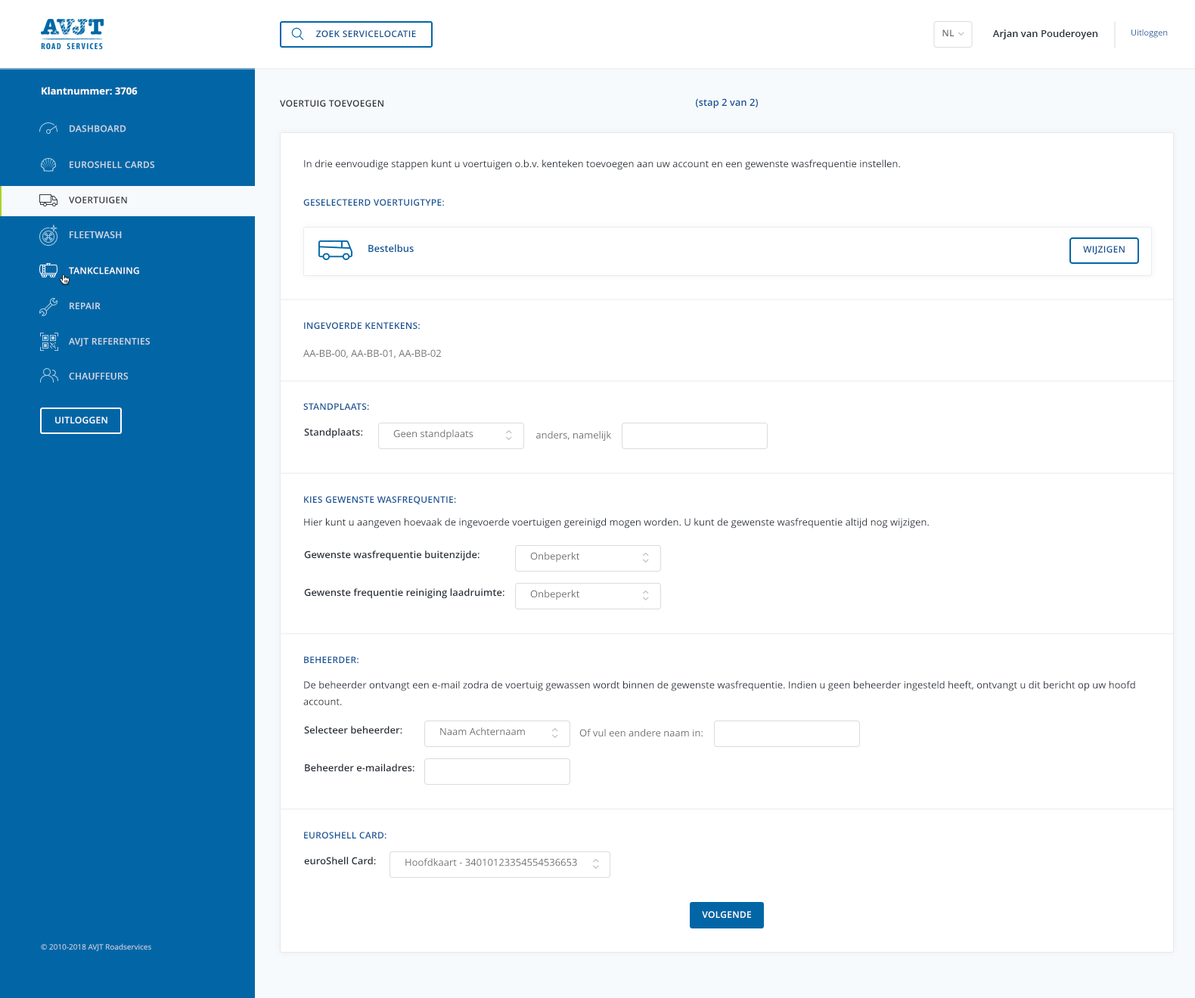
<style>
.page{position:relative;width:1195px;height:998px;background:#ffffff}
.page>*{position:absolute;margin:0}
.t1{font:9.1px "OpenSans-Semibold";letter-spacing:0.023em;color:#6d6d6d;text-transform:uppercase}
.t2{font:9.8px "OpenSans-Semibold";color:#262d37}
.t3{font:8.3px "OpenSans"}
.t4{font:9.1px "OpenSans-Semibold";letter-spacing:0.023em;color:#0b5195;text-transform:uppercase}
.t5{font:9.8px "OpenSans-Bold";color:#ffffff}
.t6{font:9.1px "OpenSans-Semibold";letter-spacing:0.023em;color:#262d37;text-transform:uppercase}
.t7{font:9.8px "OpenSans-Semibold";color:#0b5195}
.t8{font:9.1px "OpenSans-Semibold";letter-spacing:0.023em;color:#cbd8e6;text-transform:uppercase}
.t9{font:9.8px "OpenSans";color:#262d37}
.t10{font:9.1px "OpenSans-Semibold";letter-spacing:0.023em;color:#cbd9e7;text-transform:uppercase}
.t11{font:9.8px "OpenSans-Semibold";color:#005396}
.t12{font:9.1px "OpenSans-Semibold";letter-spacing:0.023em;color:#ffffff;text-transform:uppercase}
.t13{font:9.8px "OpenSans";color:#6d6d6d}
.t14{font:9.8px "OpenSans";color:#282f38}
.t15{font:9.8px/16.6px "OpenSans";color:#262d37}
.t16{font:7.6px "OpenSans"}
</style>
<div class="page">
<p class="t1" style="left:942px;top:29px;width:12px;height:7px">NL</p>
<p class="t2" style="left:992px;top:29px;width:106px;height:10px">Arjan van Pouderoyen</p>
<p class="t3" style="left:1130px;top:29px;width:37px;height:9px">Uitloggen</p>
<p class="t4" style="left:316px;top:30px;width:100px;height:8px">zoek servicelocatie</p>
<p class="t5" style="left:42px;top:87px;width:96px;height:8px">Klantnummer: 3706</p>
<p class="t6" style="left:280px;top:100px;width:103px;height:7px">Voertuig toevoegen</p>
<p class="t7" style="left:696px;top:98px;width:62px;height:11px">(stap 2 van 2)</p>
<p class="t8" style="left:70px;top:125px;width:56px;height:7px">dashboard</p>
<p class="t8" style="left:70px;top:161px;width:85px;height:8px">EuroShell Cards</p>
<p class="t9" style="left:304px;top:160px;width:596px;height:10px">In drie eenvoudige stappen kunt u voertuigen o.b.v. kenteken toevoegen aan uw account en een gewenste wasfrequentie instellen.</p>
<p class="t6" style="left:69px;top:197px;width:58px;height:6px">voertuigen</p>
<p class="t4" style="left:303px;top:199px;width:141px;height:7px">Geselecteerd voertuigtype:</p>
<p class="t10" style="left:70px;top:231px;width:52px;height:7px">fleetwash</p>
<p class="t11" style="left:368px;top:244px;width:46px;height:9px">Bestelbus</p>
<p class="t4" style="left:1083px;top:246px;width:41px;height:9px">Wijzigen</p>
<p class="t12" style="left:69px;top:267px;width:70px;height:7px">tankcleaning</p>
<p class="t8" style="left:70px;top:302px;width:31px;height:7px">repair</p>
<p class="t4" style="left:304px;top:322px;width:116px;height:8px">ingevoerde kentekens:</p>
<p class="t10" style="left:69px;top:337px;width:81px;height:10px">avjt referenties</p>
<p class="t13" style="left:303px;top:349px;width:139px;height:9px">AA-BB-00, AA-BB-01, AA-BB-02</p>
<p class="t10" style="left:69px;top:373px;width:60px;height:7px">chauffeurs</p>
<p class="t4" style="left:303px;top:403px;width:66px;height:8px">standplaats:</p>
<p class="t12" style="left:55px;top:417px;width:52px;height:7px">uitloggen</p>
<p class="t2" style="left:304px;top:428px;width:59px;height:11px">Standplaats:</p>
<p class="t13" style="left:393px;top:429px;width:80px;height:11px">Geen standplaats</p>
<p class="t13" style="left:535px;top:431px;width:77px;height:11px">anders, namelijk</p>
<p class="t4" style="left:304px;top:496px;width:152px;height:9px">Kies gewenste wasfrequentie:</p>
<p class="t14" style="left:304px;top:518px;width:625px;height:11px">Hier kunt u aangeven hoevaak de ingevoerde voertuigen gereinigd mogen worden. U kunt de gewenste wasfrequentie altijd nog wijzigen.</p>
<p class="t2" style="left:304px;top:550px;width:175px;height:11px">Gewenste wasfrequentie buitenzijde:</p>
<p class="t13" style="left:530px;top:552px;width:50px;height:11px">Onbeperkt</p>
<p class="t2" style="left:304px;top:588px;width:200px;height:11px">Gewenste frequentie reiniging laadruimte:</p>
<p class="t13" style="left:530px;top:590px;width:50px;height:10px">Onbeperkt</p>
<p class="t4" style="left:304px;top:656px;width:54px;height:8px">Beheerder:</p>
<p class="t15" style="left:303px;top:681px;width:832px;height:24px">De beheerder ontvangt een e-mail zodra de voertuig gewassen wordt binnen de gewenste wasfrequentie. Indien u geen beheerder ingesteld heeft, ontvangt u dit bericht op uw hoofd account.</p>
<p class="t2" style="left:304px;top:726px;width:98px;height:8px">Selecteer beheerder:</p>
<p class="t13" style="left:440px;top:727px;width:85px;height:9px">Naam Achternaam</p>
<p class="t13" style="left:579px;top:729px;width:123px;height:8px">Of vul een andere naam in:</p>
<p class="t2" style="left:305px;top:764px;width:109px;height:8px">Beheerder e-mailadres:</p>
<p class="t4" style="left:304px;top:832px;width:82px;height:7px">euroShell Card:</p>
<p class="t2" style="left:304px;top:857px;width:72px;height:8px">euroShell Card:</p>
<p class="t13" style="left:405px;top:858px;width:172px;height:9px">Hoofdkaart - 34010123354554536653</p>
<p class="t12" style="left:702px;top:911px;width:49px;height:8px">volgende</p>
<p class="t16" style="left:41px;top:944px;width:110px;height:7px">© 2010-2018 AVJT Roadservices</p>
</div>
